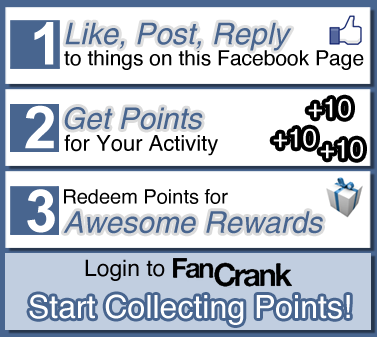
<style>
.page{position:relative;width:377px;height:337px;background:#ffffff}
.page>*{position:absolute;margin:0}
.t1{font:59.1px "Arial-BoldMT";color:#ffffff}
.t2{font:30px "Helvetica_cyr-Oblique";color:#48658f}
.t3{font:21px "Helvetica";color:#000000}
.t4{font:18px "Helvetica";color:#000000}
.t5{font:26.3px "Helvetica";color:#fefefe}
.t6{font:22px "Helvetica";color:#000000}
.t7{font:20px "Helvetica";color:#000000}
.t8{font:22.8px "Helvetica";color:#010000}
.t9{font:32px "Helvetica";color:#ffffff}
</style>
<div class="page">
<p class="t1" style="left:34px;top:22px;width:20px;height:43px">1</p>
<p class="t2" style="left:65px;top:22px;width:227px;height:29px">Like, Post, Reply</p>
<p class="t3" style="left:64px;top:50px;width:300px;height:20px"><span class="t4"><br></span>to things on this Facebook Page</p>
<p class="t5" style="left:308px;top:98px;width:43px;height:20px">+10</p>
<p class="t1" style="left:25px;top:105px;width:29px;height:44px">2</p>
<p class="t2" style="left:64px;top:107px;width:139px;height:23px">Get Points</p>
<p class="t6" style="left:64px;top:134px;width:154px;height:22px">for Your Activity</p>
<p class="t5" style="left:273px;top:128px;width:43px;height:20px">+10</p>
<p class="t5" style="left:320px;top:139px;width:43px;height:20px">+10</p>
<p class="t1" style="left:27px;top:189px;width:28px;height:44px">3</p>
<p class="t7" style="left:64px;top:189px;width:164px;height:15px">Redeem Points for</p>
<p class="t2" style="left:63px;top:211px;width:260px;height:23px">Awesome Rewards</p>
<p class="t8" style="left:85px;top:259px;width:80px;height:22px">Login to</p>
<p class="t9" style="left:29px;top:294px;width:321px;height:31px">Start Collecting Points!</p>
</div>
